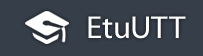
<style>
.page{position:relative;width:203px;height:56px;background:#363e49}
.page>*{position:absolute;margin:0}
.t1{font:32px "MyriadWebPro";color:#ffffff}
</style>
<div class="page">
<p class="t1" style="left:88px;top:16px;width:98px;height:23px">EtuUTT</p>
</div>
